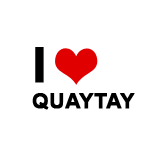
<style>
.page{position:relative;width:152px;height:152px;background:#ffffff}
.page>*{position:absolute;margin:0}
.t1{font:21.4px "Arial-BoldMT";color:#000000;text-transform:uppercase;font-weight:bold}
.t2{font:48px "Arial-BoldMT";color:#000000;text-transform:uppercase;font-weight:bold}
</style>
<div class="page">
<p class="t1" style="left:32px;top:47px;width:103px;height:63px"><span class="t2">I    <br></span>Quaytay</p>
</div>
